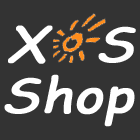
<style>
.page{position:relative;width:140px;height:140px;background:#333333}
.page>*{position:absolute;margin:0}
.t1{font:47.8px "ComicSansMS";color:#ffffff;font-weight:bold;font-style:italic;scale:1.16 1}
.t2{font:47.8px "ComicSansMS";color:#ffffff;font-weight:bold;font-style:italic;scale:1.14 1}
</style>
<div class="page">
<p class="t1" style="left:8px;top:25px;width:128px;height:39px">X  S</p>
<p class="t2" style="left:4px;top:74px;width:131px;height:53px">Shop</p>
</div>
